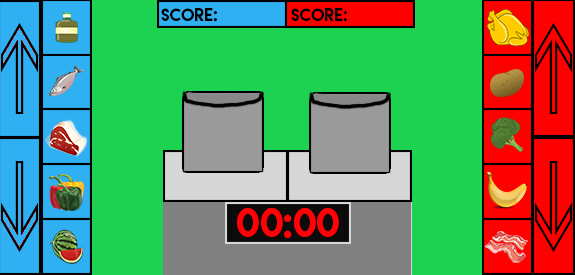
<style>
.page{position:relative;width:575px;height:275px;background:#1dd250}
.page>*{position:absolute;margin:0}
.t1{font:16px "LemonMilk";color:#000000}
.t2{font:36px "LemonMilk";color:#ff0107}
</style>
<div class="page">
<p class="t1" style="left:161px;top:8px;width:56px;height:14px">Score:</p>
<p class="t1" style="left:291px;top:8px;width:56px;height:14px">Score:</p>
<p class="t2" style="left:237px;top:208px;width:102px;height:30px">00:00</p>
</div>
